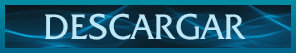
<style>
.page{position:relative;width:296px;height:53px}
.page>*{position:absolute;margin:0}
.t1{font:36px "FrizQuadrataITCbyBT-Roman";color:#bbe7f6}
</style>
<div class="page">
<p class="t1" style="left:45px;top:13px;width:201px;height:27px">DESCARGAR</p>
</div>
